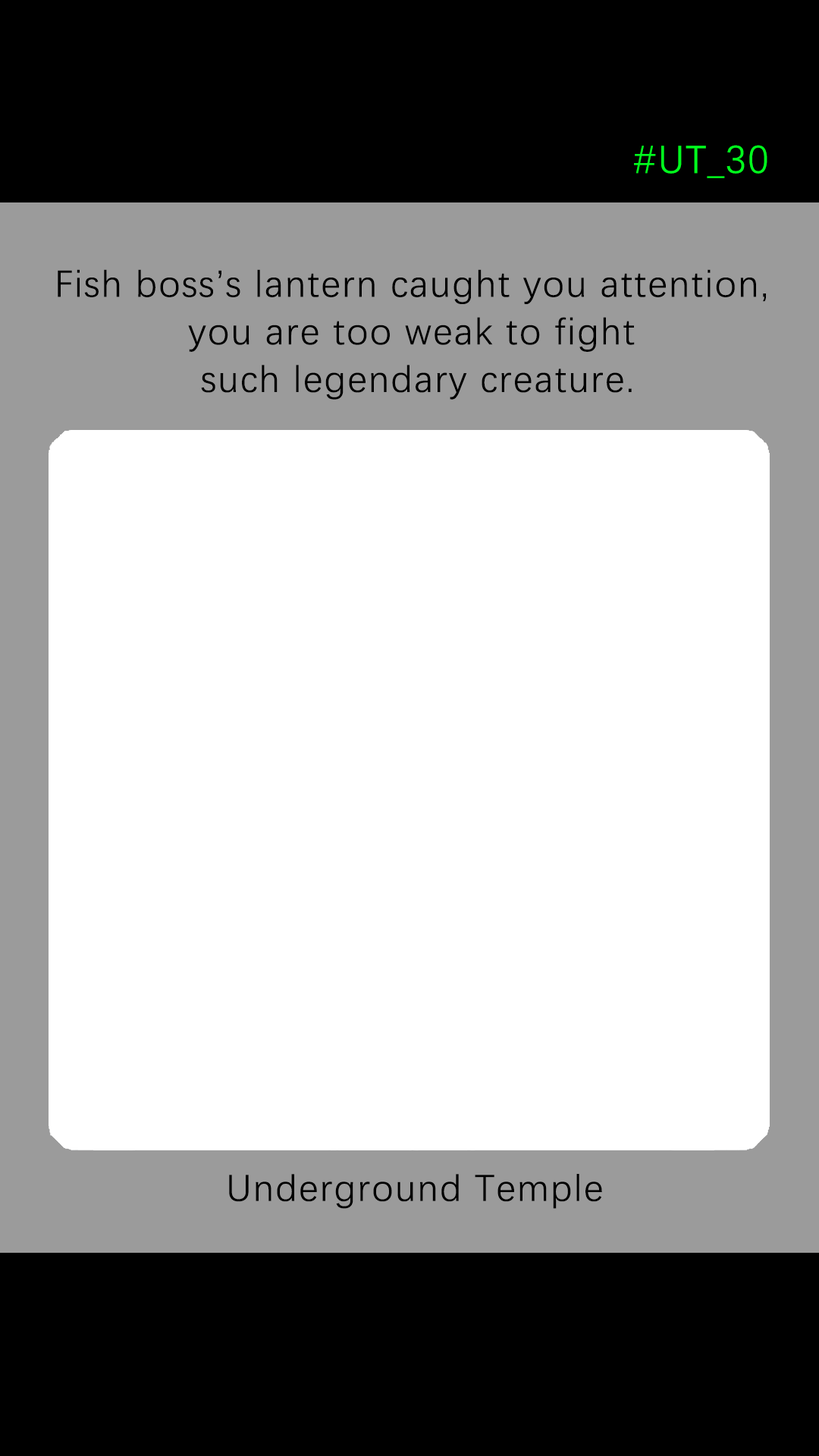
<style>
.page{position:relative;width:819px;height:1456px;background:#ffffff}
.page>*{position:absolute;margin:0}
.t1{font:39.2px "DengXian-Regular";letter-spacing:0.04em;color:#00ff1e}
.t2{font:37.9px/47.6px "DengXian-Regular";letter-spacing:0.04em;color:#000000}
.t3{font:37.9px "DengXian-Regular";letter-spacing:0.04em;color:#000000}
</style>
<div class="page">
<p class="t1" style="left:634px;top:145px;width:133px;height:33px">#UT_30</p>
<p class="t2" style="left:58px;top:269px;width:708px;height:131px;text-align:center">Fish boss’s lantern caught you attention, <br>you are too weak to fight <br>such legendary creature.</p>
<p class="t3" style="left:229px;top:1174px;width:373px;height:35px">Underground Temple</p>
</div>
